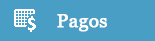
<style>
.page{position:relative;width:155px;height:41px;background:#489ec4}
.page>*{position:absolute;margin:0}
.t1{font:18.7px "Georgia";color:#ffffff;font-weight:bold}
</style>
<div class="page">
<p class="t1" style="left:57px;top:14px;width:50px;height:18px">Pagos</p>
</div>
